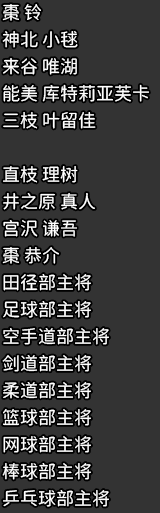
<style>
.page{position:relative;width:160px;height:513px;background:#333333}
.page>*{position:absolute;margin:0}
.t1{font:18px/27px "Resource-Han-Rounded-CN-Regular";color:#ffffff}
</style>
<div class="page">
<p class="t1" style="left:2px;top:4px;width:147px;height:503px">棗 铃<br>神北 小毬<br>来谷 唯湖<br>能美 库特莉亚芙卡<br>三枝 叶留佳<br><br>直枝 理树<br>井之原 真人<br>宫沢 谦吾<br>棗 恭介<br>田径部主将<br>足球部主将<br>空手道部主将<br>剑道部主将<br>柔道部主将<br>篮球部主将<br>网球部主将<br>棒球部主将<br>乒乓球部主将</p>
</div>
